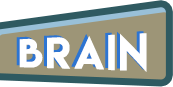
<style>
.page{position:relative;width:173px;height:87px;background:#9d9577}
.page>*{position:absolute;margin:0}
.t1{font:41.3px "LemonMilk";letter-spacing:0.05em;color:#ffffff}
</style>
<div class="page">
<p class="t1" style="left:19px;top:33px;width:128px;height:39px">Brain</p>
</div>
